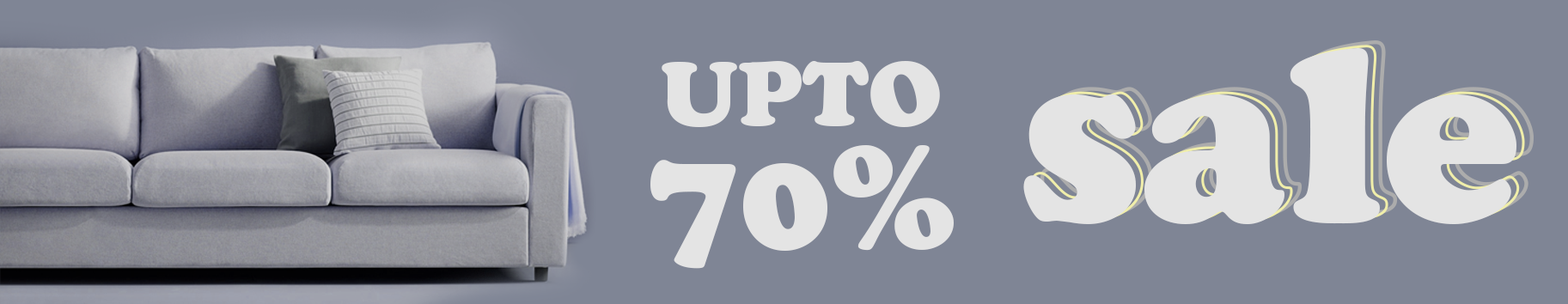
<style>
.page{position:relative;width:1568px;height:304px;background:#7f8595}
.page>*{position:absolute;margin:0}
.t1{font:245.9px "CooperBlackStd";color:#e4e4e4}
.t2{font:89.7px/123.6px "CooperBlackStd";color:#e4e4e4}
.t3{font:145.7px/123.6px "CooperBlackStd";color:#e4e4e4}
</style>
<div class="page">
<p class="t1" style="left:1023px;top:48px;width:493px;height:176px">sale</p>
<p class="t2" style="left:650px;top:61px;width:304px;height:208px;text-align:center">UPTO<br><span class="t3">70%</span></p>
</div>
